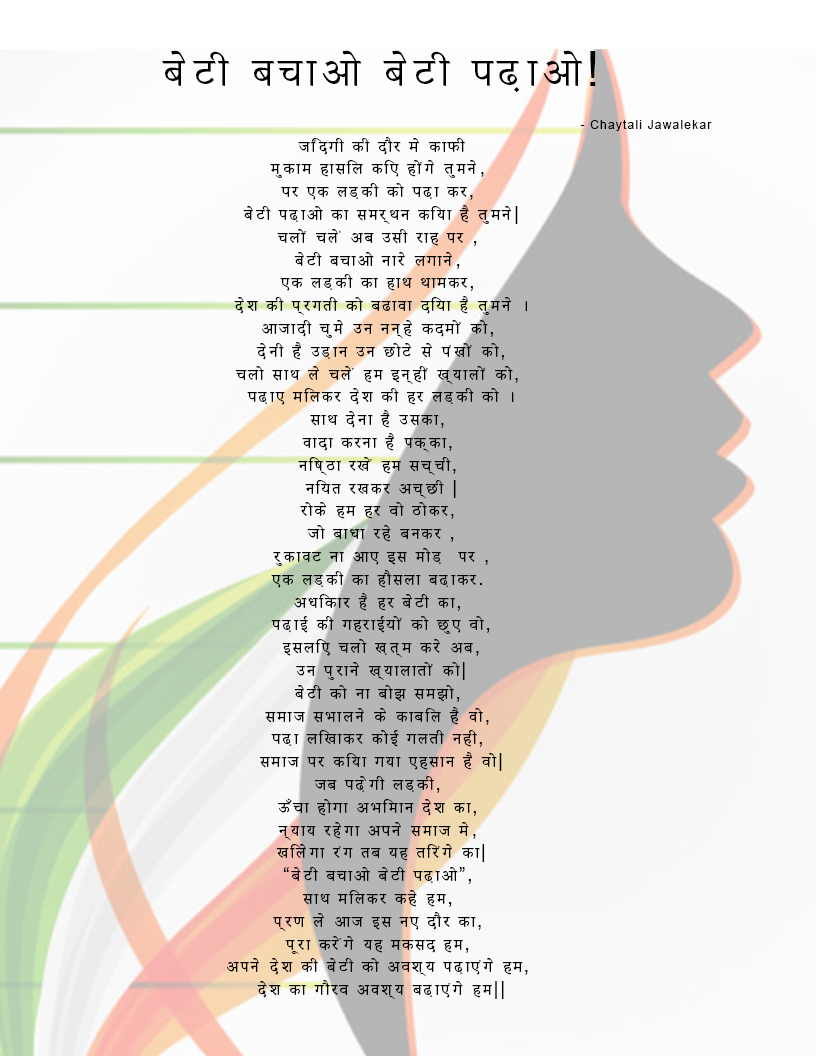
<style>
.page{position:relative;width:816px;height:1056px}
.page>*{position:absolute;margin:0}
.t1{font:19px "AdobeDevanagari-Regular";letter-spacing:0.1em;color:#000000}
.t2{font:48px "AdobeDevanagari-Regular";letter-spacing:0.1em;color:#000000}
.t3{font:48px "ArialMT";letter-spacing:0.1em;color:#000000}
.t4{font:12px "ArialMT";letter-spacing:0.1em;color:#000000}
.t5{font:19px "ArialMT";letter-spacing:0.1em;color:#000000}
</style>
<div class="page">
<p class="t1" style="left:162px;top:50px;width:550px;height:950px;text-align:center"><span class="t2">बेटी बचाओ बेटी पढ़ाओ</span><span class="t3">!<br>                                                      </span><span class="t4">- Chaytali Jawalekar <br></span>जिंदगी की दौर मे काफी<br>मुकाम हासिल किए होंगे तुमने<span class="t5">, <br></span>पर एक लड़की को पढ़ा कर<span class="t5">, <br></span>बेटी पढ़ाओ का समर्थन किया है तुमने<span class="t5">|<br></span>चलों चलें अब उसी राह पर<span class="t5"> , <br></span>बेटी बचाओ नारे लगाने<span class="t5">, <br></span>एक लड़की का हाथ थामकर<span class="t5">, <br></span>देश की प्रगती को बढावा दिया है तुमने ।<br>आजादी चुमे उन नन्हे कदमों को<span class="t5">, <br></span>देनी है उड़ान उन छोटे से पंखों को<span class="t5">,<br></span>चलो साथ ले चलें हम इन्हीं ख्यालों को<span class="t5">, <br></span>पढ़ाए मिलकर देश की हर लड़की को ।<br>साथ देना है उसका<span class="t5">, <br></span>वादा करना है पक्का<span class="t5">, <br></span>निष्ठा रखें हम सच्ची<span class="t5">, <br></span>नियत रखकर अच्छी<span class="t5"> |<br></span>रोके हम हर वो ठोकर<span class="t5">, <br></span>जो बाधा रहे बनकर<span class="t5"> ,<br></span>रुकावट ना आए इस मोड़  पर<span class="t5"> ,<br></span>एक लड़की का हौसला बढ़ाकर<span class="t5">. <br></span>अधिकार है हर बेटी का<span class="t5">, <br></span>पढ़ाई की गहराईयों को छुए वो<span class="t5">,<br> </span>इसलिए चलो ख़त्म करे अब<span class="t5">, <br></span>उन पुराने ख्यालातों को<span class="t5">|<br></span>बेटी को ना बोझ समझो<span class="t5">, <br></span>समाज सभालने के काबिल है वो<span class="t5">, <br></span>पढ़ा लिखाकर कोई गलती नही<span class="t5">, <br></span>समाज पर किया गया एहसान है वो<span class="t5">|<br></span>जब पढ़ेगी लड़की<span class="t5">, <br></span>ऊँचा होगा अभिमान देश का<span class="t5">, <br></span>न्याय रहेगा अपने समाज मे<span class="t5">, <br></span>खिलेगा रंग तब यह तिरंगे का<span class="t5">|<br>“</span>बेटी बचाओ बेटी पढ़ाओ<span class="t5">”, <br></span>साथ मिलकर कहे हम<span class="t5">, <br></span>प्रण ले आज इस नए दौर का<span class="t5">, <br></span>पूरा करेंगे यह मकसद हम<span class="t5">, <br></span>अपने देश की बेटी को अवश्य पढ़ाएंगे हम<span class="t5">, <br></span>देश का गौरव अवश्य बढ़ाएंगे हम<span class="t5">||</span></p>
</div>
